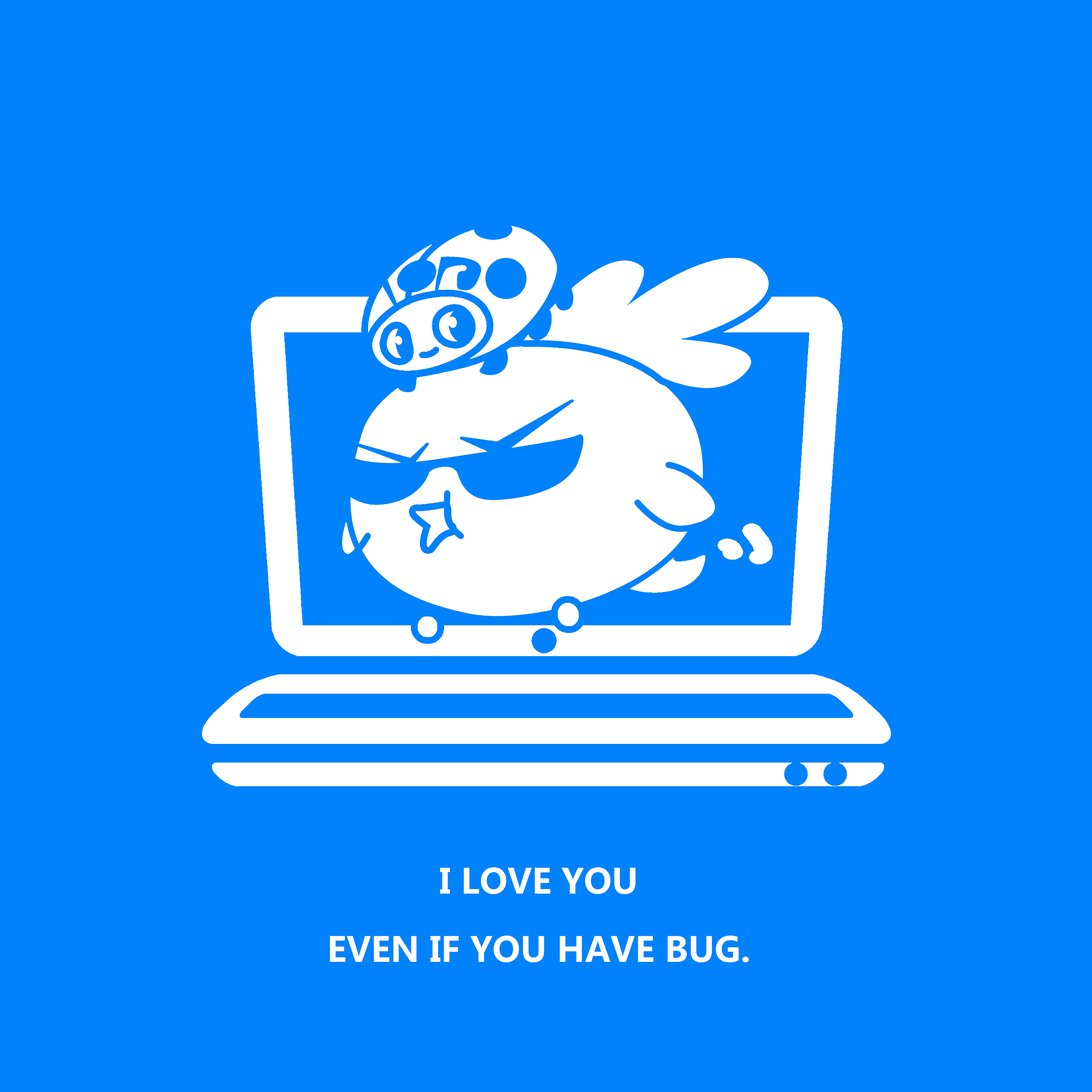
<style>
.page{position:relative;width:1092px;height:1092px;background:#0082fc}
.page>*{position:absolute;margin:0}
.t1{font:34.1px/68.2px "MicrosoftYaHei-Bold";color:#ffffff}
</style>
<div class="page">
<p class="t1" style="left:330px;top:867px;width:419px;height:95px;text-align:center">I LOVE YOU<br>EVEN IF YOU HAVE BUG.</p>
</div>
